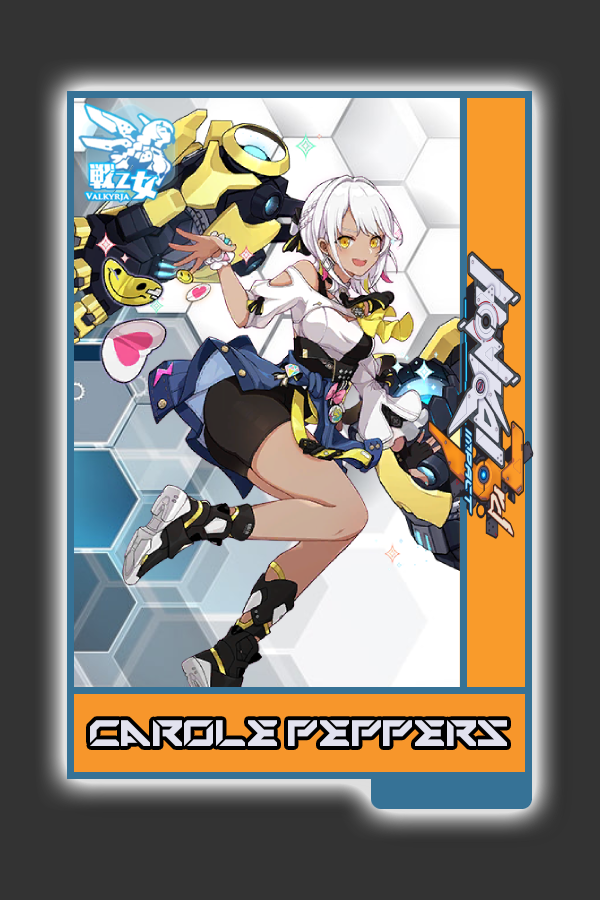
<style>
.page{position:relative;width:600px;height:900px;background:#333333}
.page>*{position:absolute;margin:0}
.t1{font:25.8px "Mechsuit";color:#e2e2ef}
</style>
<div class="page">
<p class="t1" style="left:90px;top:720px;width:417px;height:26px">Carole peppers</p>
</div>
